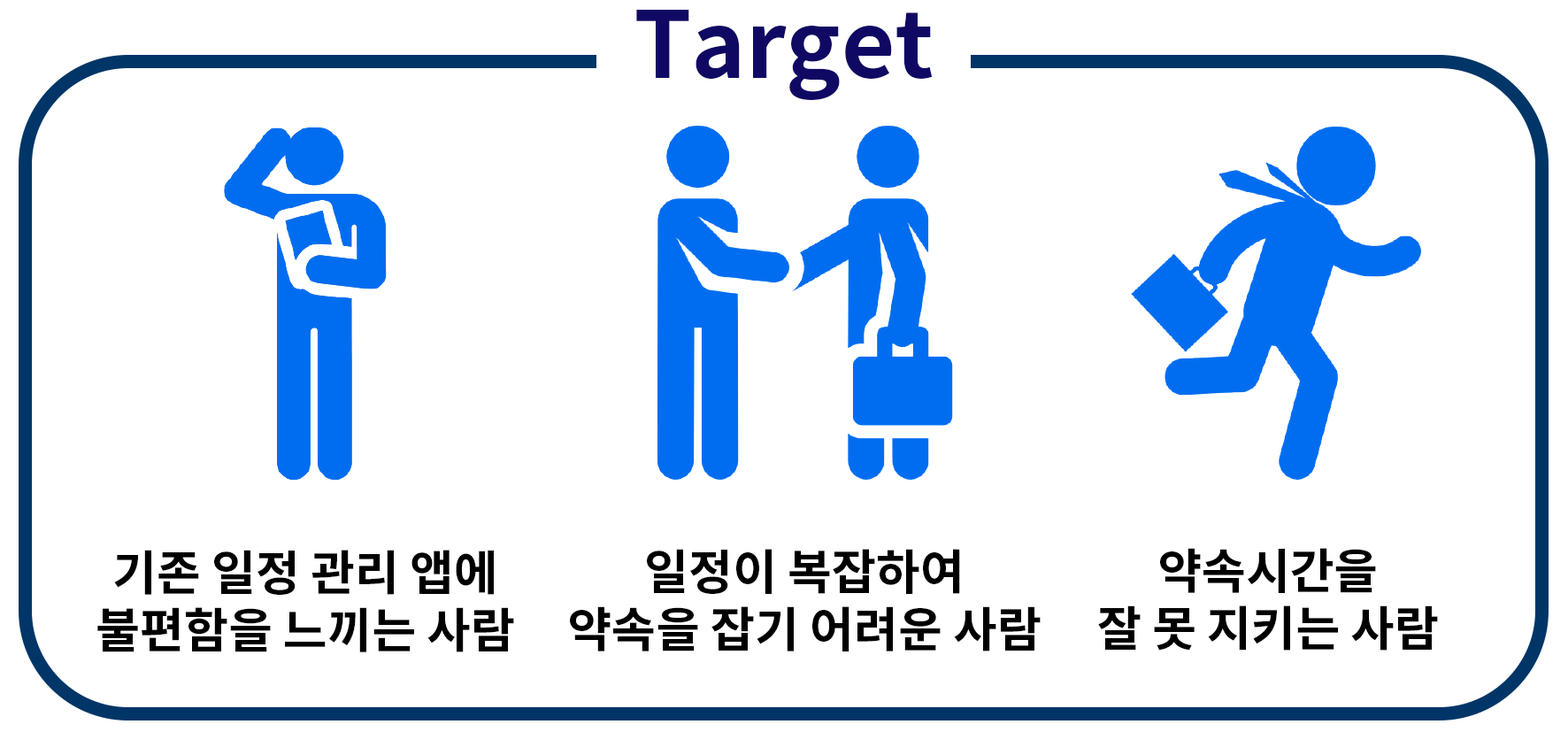
<style>
.page{position:relative;width:1568px;height:732px;background:#ffffff}
.page>*{position:absolute;margin:0}
.t1{font:92.2px "NotoSansCJKkr-Bold";color:#100964}
.t2{font:47.9px "NotoSansCJKkr-Bold";color:#000000}
</style>
<div class="page">
<p class="t1" style="left:636px;top:10px;width:297px;height:90px">Target</p>
<p class="t2" style="left:97px;top:550px;width:417px;height:102px;text-align:center">기존 일정 관리 앱에<br>불편함을 느끼는 사람</p>
<p class="t2" style="left:570px;top:549px;width:471px;height:102px;text-align:center">일정이 복잡하여<br>약속을 잡기 어려운 사람</p>
<p class="t2" style="left:1098px;top:548px;width:340px;height:102px;text-align:center">약속시간을<br>잘 못 지키는 사람</p>
</div>
